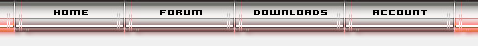
<style>
.page{position:relative;width:478px;height:46px}
.page>*{position:absolute;margin:0}
.t1{font:8px "Hooge0564";color:#000000}
</style>
<div class="page">
<p class="t1" style="left:53px;top:9px;width:36px;height:8px">HOME</p>
<p class="t1" style="left:160px;top:10px;width:42px;height:5px">FORUM</p>
<p class="t1" style="left:254px;top:10px;width:73px;height:5px">DOWNLOADS</p>
<p class="t1" style="left:373px;top:10px;width:54px;height:5px">ACCOUNT</p>
</div>
